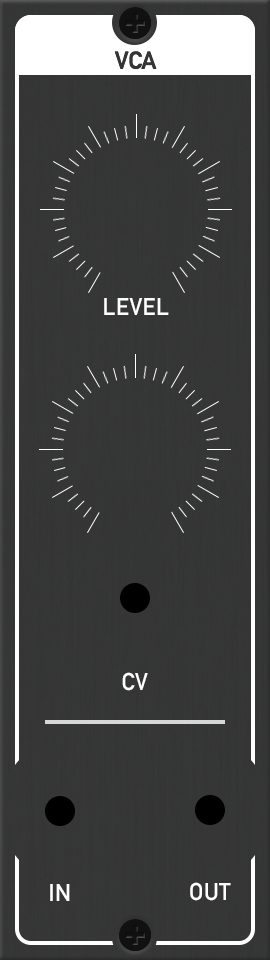
<style>
.page{position:relative;width:270px;height:960px}
.page>*{position:absolute;margin:0}
.t1{font:24px "DINAlternate-Bold";color:#ffffff;font-variant:small-caps}
</style>
<div class="page">
<p class="t1" style="left:104px;top:298px;width:65px;height:17px">LEVEL</p>
<p class="t1" style="left:122px;top:672px;width:26px;height:19px">CV</p>
<p class="t1" style="left:50px;top:884px;width:20px;height:17px">IN</p>
<p class="t1" style="left:190px;top:882px;width:41px;height:19px">OUT</p>
</div>
